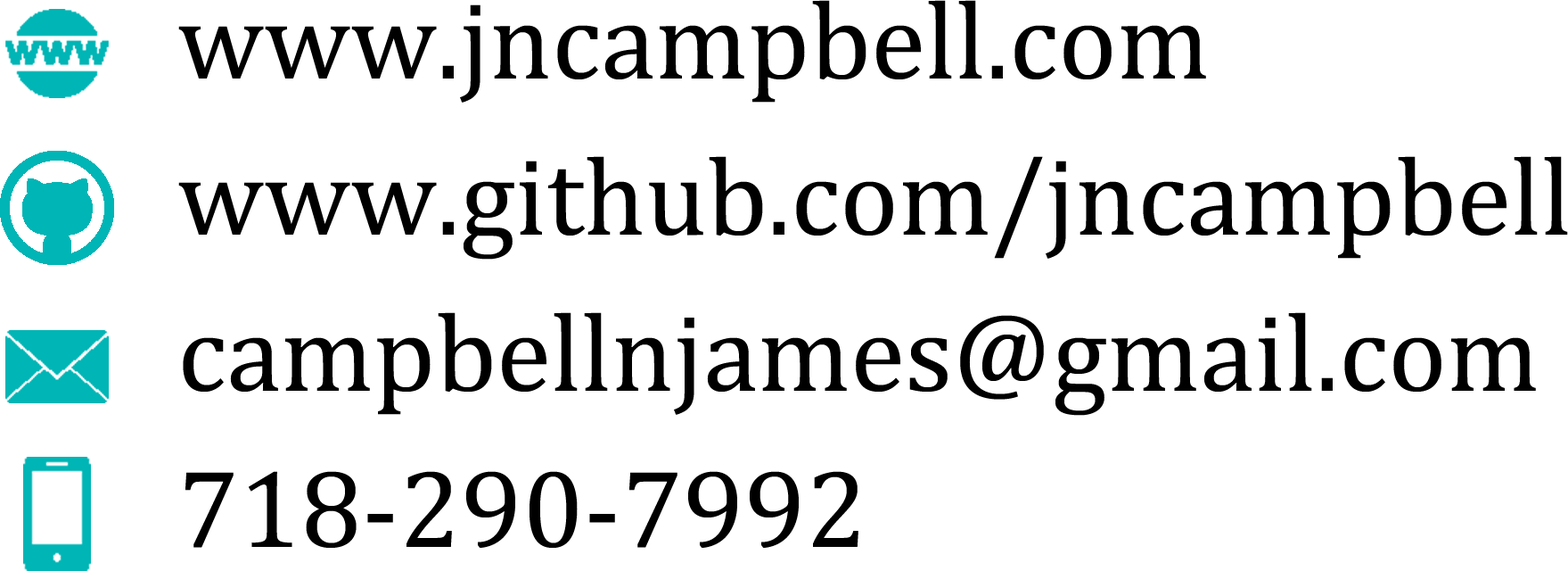
<style>
.page{position:relative;width:1568px;height:571px;background:#ffffff}
.page>*{position:absolute;margin:0}
.t1{font:111.4px/156px "Cambria";color:#000000}
</style>
<div class="page">
<p class="t1" style="left:178px;top:0px;width:1390px;height:547px">www.jncampbell.com<br>www.github.com/jncampbell<br>campbellnjames@gmail.com<br>718-290-7992</p>
</div>
